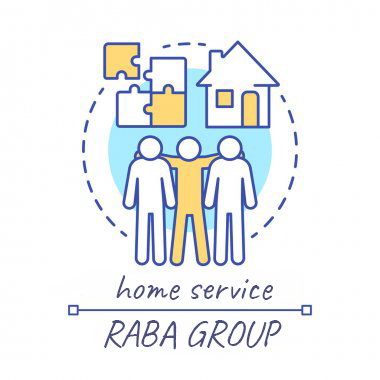
<style>
.page{position:relative;width:380px;height:380px;background:#ffffff}
.page>*{position:absolute;margin:0}
.t1{font:37.3px "Caveat-Regular";color:#4b4f7c}
</style>
<div class="page">
<p class="t1" style="left:116px;top:275px;width:157px;height:25px">home service</p>
<p class="t1" style="left:104px;top:320px;width:178px;height:30px">RABA GROUP</p>
</div>
